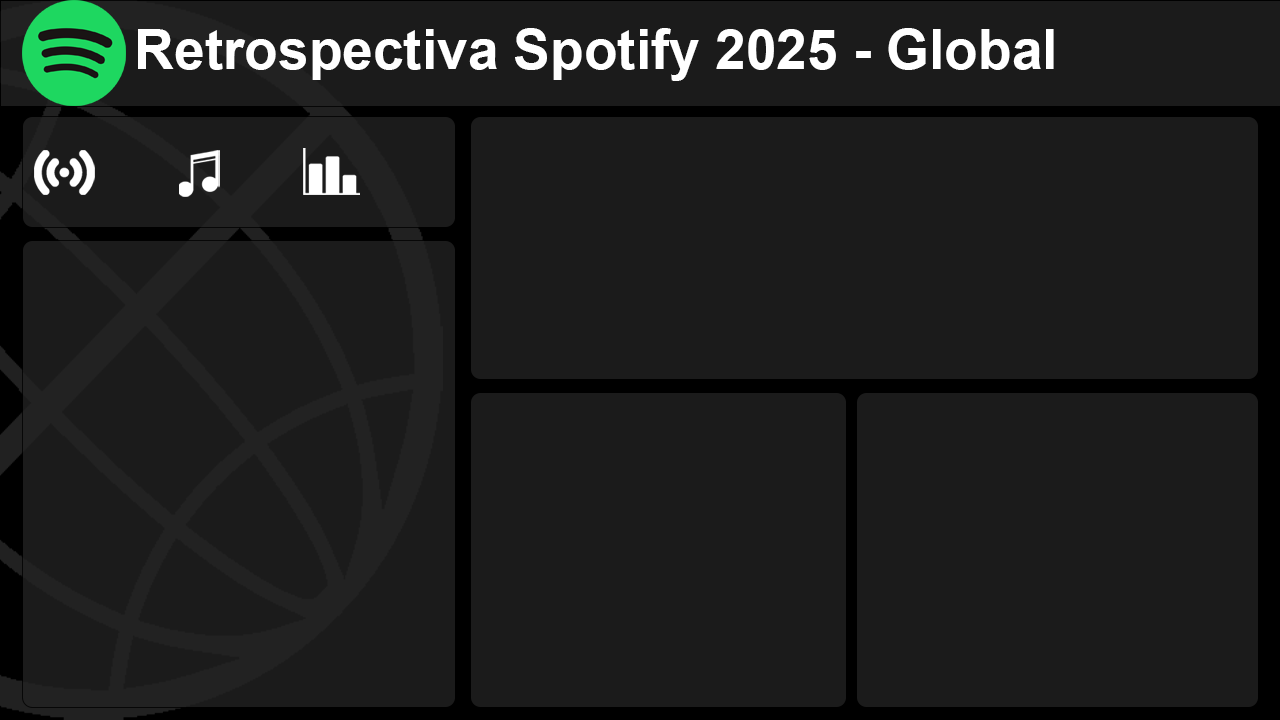
<style>
.page{position:relative;width:1280px;height:720px;background:#1b1b1b}
.page>*{position:absolute;margin:0}
.t1{font:55px "Arial-BoldMT";color:#ffffff}
</style>
<div class="page">
<p class="t1" style="left:138px;top:28px;width:916px;height:53px">Retrospectiva Spotify 2025 - Global</p>
</div>
